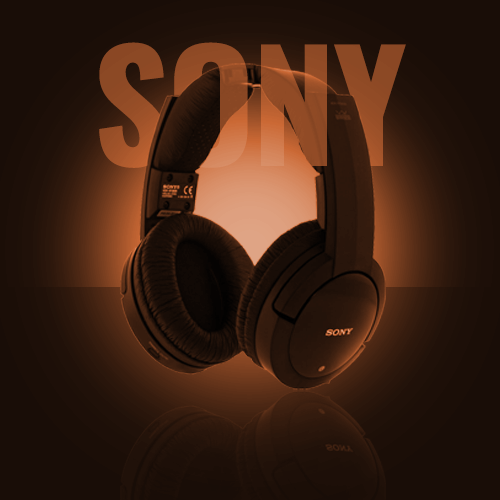
<style>
.page{position:relative;width:500px;height:500px}
.page>*{position:absolute;margin:0}
.t1{font:150px "Oswald-Bold";letter-spacing:-0.02em}
</style>
<div class="page">
<p class="t1" style="left:99px;top:42px;width:307px;height:126px">SONY</p>
</div>
